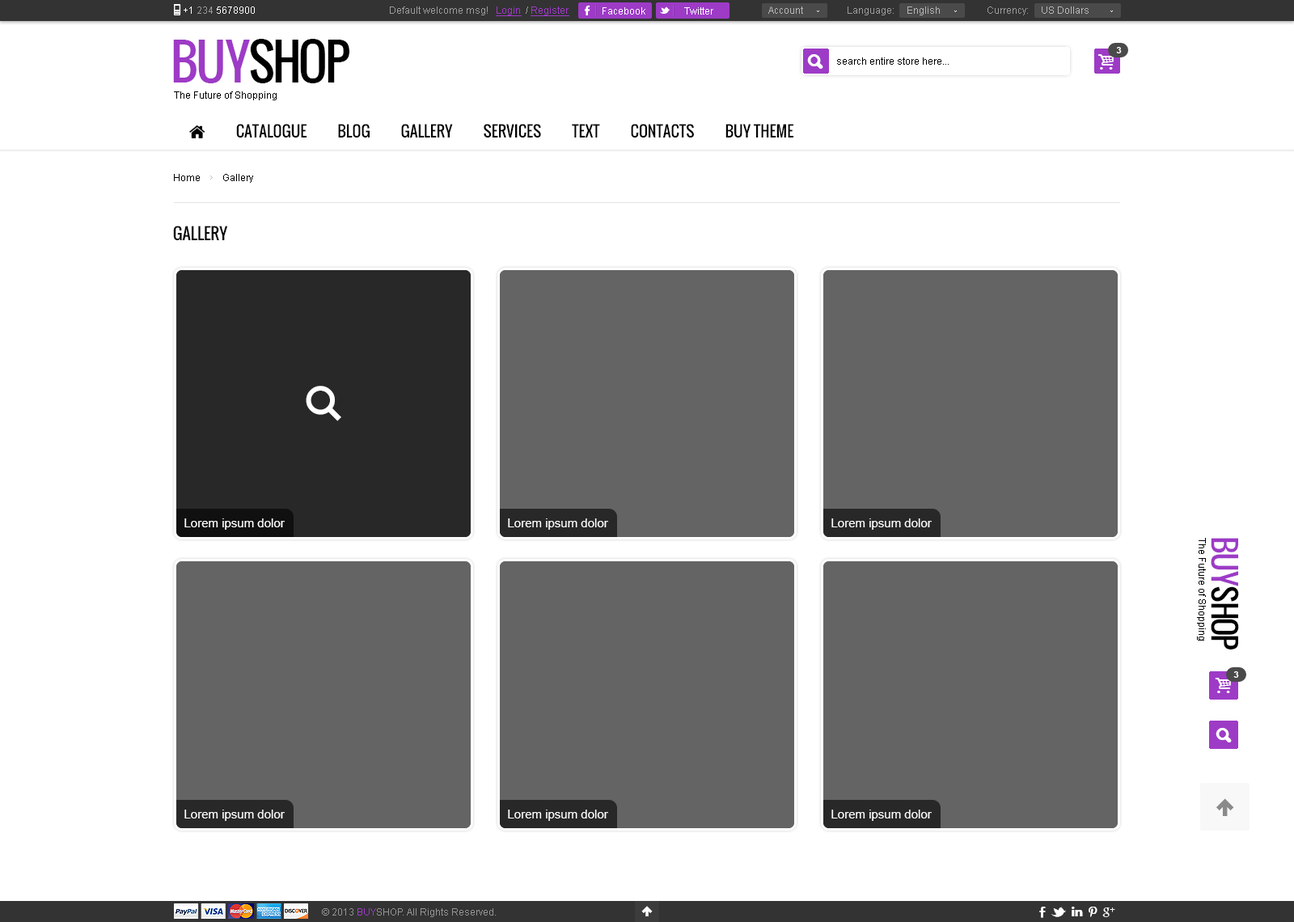
<style>
.page{position:relative;width:1294px;height:922px;background:#ffffff}
.page>*{position:absolute;margin:0}
.t1{font:9.7px "ArialMT";color:#ffffff}
.t2{font:9.7px "ArialMT";color:#9b9b9b}
.t3{font:9.7px "ArialMT";color:#9d3bc6;text-decoration:underline}
.t4{font:9.7px "ArialMT";color:#b6b6b6}
.t5{font:48.5px "Oswald";letter-spacing:-0.06em;color:#000000;text-transform:uppercase}
.t6{font:48.5px "Oswald";letter-spacing:-0.06em;color:#9d3bc6;text-transform:uppercase}
.t7{font:8.9px "Arial-BoldMT";color:#ffffff;text-transform:uppercase}
.t8{font:9.7px "ArialMT";color:#000000}
.t9{font:16.2px "Oswald";color:#000000;text-transform:uppercase}
.t10{font:12.1px "ArialMT";color:#ffffff}
.t11{font:30.7px "Oswald";letter-spacing:-0.06em;color:#000000;text-transform:uppercase}
.t12{font:30.7px "Oswald";letter-spacing:-0.06em;color:#9d3bc6;text-transform:uppercase}
.t13{font:9.7px "ArialMT";color:#959595}
.t14{font:9.7px "ArialMT";color:#9d3bc6}
</style>
<div class="page">
<p class="t1" style="left:184px;top:6px;width:71px;height:8px">+1 <span class="t2">234 </span>5678900</p>
<p class="t2" style="left:390px;top:6px;width:179px;height:10px">Default welcome msg!   <span class="t3">Login </span> / <span class="t3">Register</span></p>
<p class="t2" style="left:390px;top:6px;width:179px;height:10px">Default welcome msg!   <span class="t3">Login </span> / <span class="t3">Register</span></p>
<p class="t1" style="left:602px;top:7px;width:43px;height:8px">Facebook</p>
<p class="t1" style="left:684px;top:7px;width:29px;height:8px">Twitter</p>
<p class="t4" style="left:768px;top:6px;width:35px;height:8px">Account</p>
<p class="t2" style="left:847px;top:6px;width:93px;height:9px">Language:     <span class="t4">English</span></p>
<p class="t4" style="left:987px;top:6px;width:101px;height:9px"><span class="t2">Currency:     </span>US Dollars</p>
<p class="t5" style="left:173px;top:39px;width:176px;height:44px"><span class="t6">buy</span>shop</p>
<p class="t7" style="left:1116px;top:47px;width:5px;height:6px">3</p>
<p class="t8" style="left:837px;top:57px;width:111px;height:8px">search entire store here...</p>
<p class="t8" style="left:174px;top:91px;width:103px;height:9px">The Future of Shopping</p>
<p class="t8" style="left:174px;top:174px;width:79px;height:9px">Home         Gallery</p>
<p class="t9" style="left:173px;top:226px;width:55px;height:15px">GALLERY</p>
<p class="t10" style="left:184px;top:518px;width:101px;height:12px">Lorem ipsum dolor</p>
<p class="t10" style="left:508px;top:518px;width:100px;height:12px">Lorem ipsum dolor</p>
<p class="t10" style="left:831px;top:518px;width:100px;height:12px">Lorem ipsum dolor</p>
<p class="t8" style="left:1197px;top:538px;width:9px;height:102px;rotate:90deg">The Future of Shopping</p>
<p class="t11" style="left:1210px;top:538px;width:29px;height:111px;rotate:90deg"><span class="t12">buy</span>shop</p>
<p class="t7" style="left:1233px;top:671px;width:6px;height:7px">3</p>
<p class="t10" style="left:184px;top:809px;width:101px;height:12px">Lorem ipsum dolor</p>
<p class="t10" style="left:508px;top:809px;width:100px;height:12px">Lorem ipsum dolor</p>
<p class="t10" style="left:831px;top:809px;width:100px;height:12px">Lorem ipsum dolor</p>
<p class="t13" style="left:322px;top:908px;width:174px;height:9px">© 2013 <span class="t14">BUY</span>SHOP. All Rights Reserved.</p>
</div>
